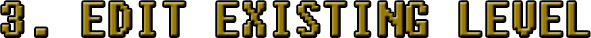
<style>
.page{position:relative;width:591px;height:38px;background:#ffffff}
.page>*{position:absolute;margin:0}
.t1{font:48px "Fixedsys";scale:0.9 1}
</style>
<div class="page">
<p class="t1" style="left:2px;top:2px;width:587px;height:34px">3. EDIT EXISTING LEVEL</p>
</div>
